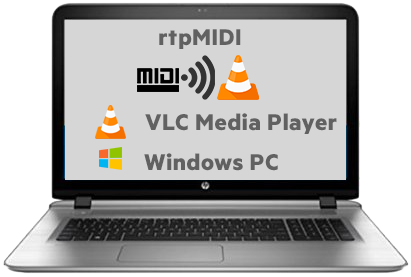
<style>
.page{position:relative;width:411px;height:277px;background:#d6d6d6}
.page>*{position:absolute;margin:0}
.t1{font:25.5px "Metric-Bold";letter-spacing:0.02em;color:#616161}
</style>
<div class="page">
<p class="t1" style="left:159px;top:29px;width:82px;height:20px">rtpMIDI</p>
<p class="t1" style="left:145px;top:113px;width:192px;height:21px">VLC Media Player</p>
<p class="t1" style="left:144px;top:153px;width:134px;height:18px">Windows PC</p>
</div>
